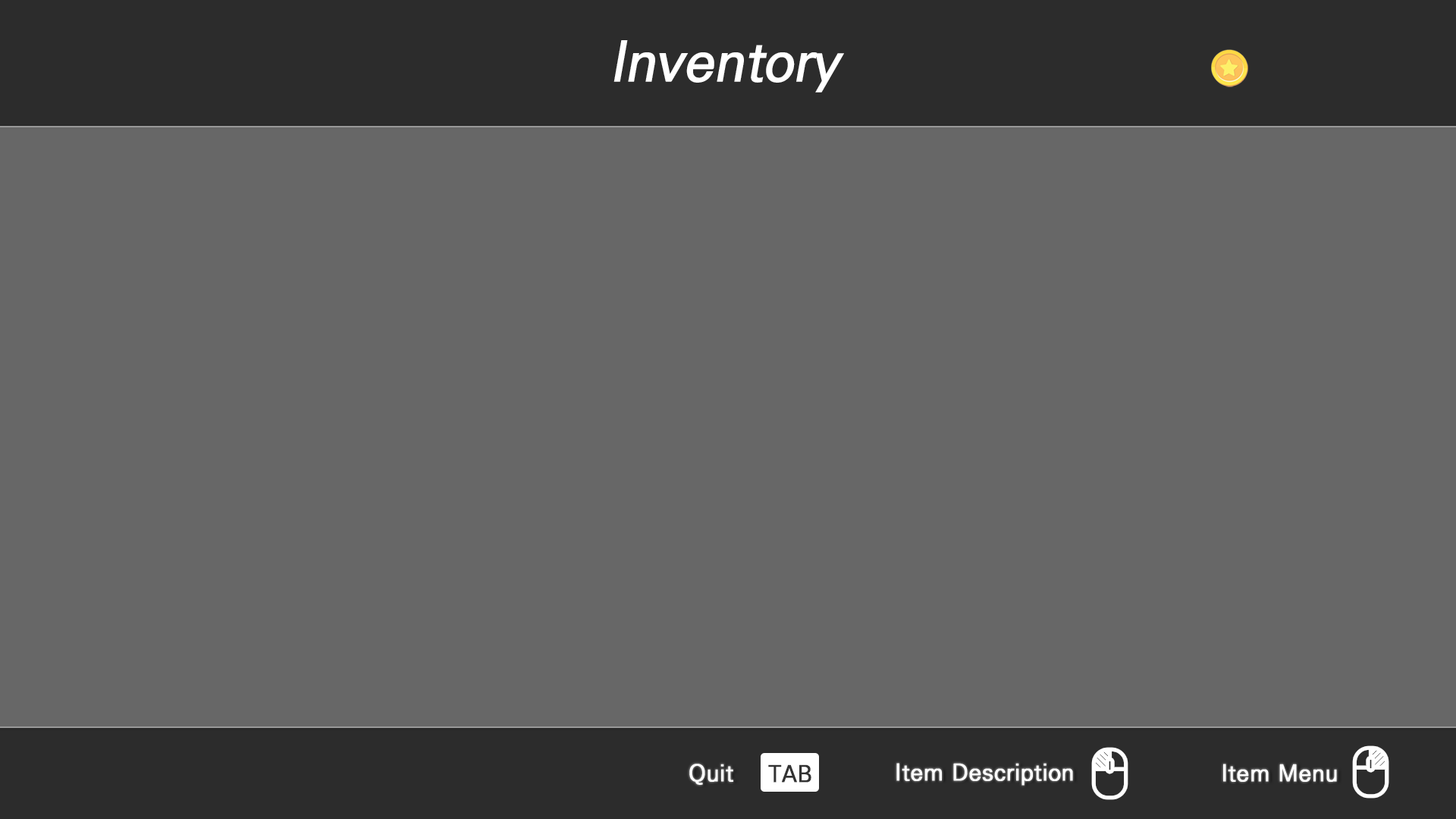
<style>
.page{position:relative;width:1456px;height:819px;background:#676767}
.page>*{position:absolute;margin:0}
.t1{font:54.6px "KoPubWorldDotumBold";color:#ffffff;font-style:italic}
.t2{font:22.7px "KoPubWorldDotumMedium";color:#ffffff;font-weight:bold}
.t3{font:22.7px "KoPubWorldDotumMedium";color:#323232;font-weight:bold}
</style>
<div class="page">
<p class="t1" style="left:613px;top:40px;width:231px;height:53px">Inventory</p>
<p class="t2" style="left:689px;top:764px;width:44px;height:21px">Quit</p>
<p class="t3" style="left:768px;top:764px;width:43px;height:19px">TAB</p>
<p class="t2" style="left:896px;top:763px;width:177px;height:23px">Item Description</p>
<p class="t2" style="left:1223px;top:764px;width:114px;height:18px">Item Menu</p>
</div>
